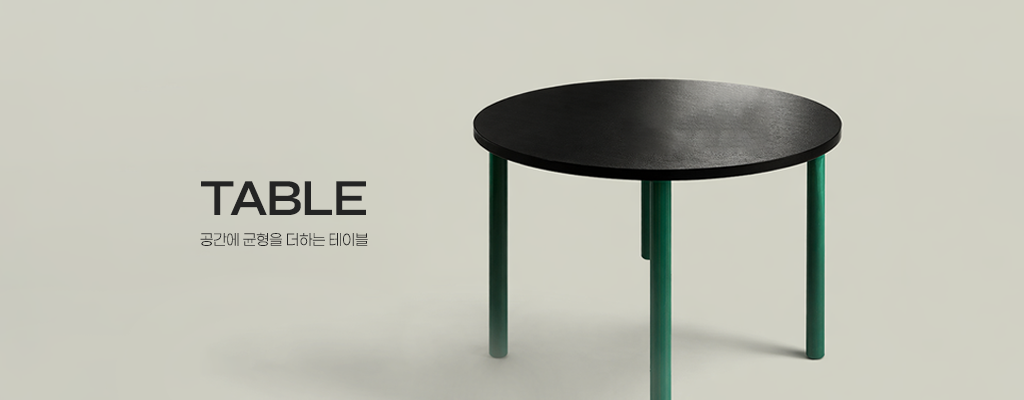
<style>
.page{position:relative;width:1024px;height:400px}
.page>*{position:absolute;margin:0}
.t1{font:52px "Syne-SemiBold";letter-spacing:-0.04em;color:#242424}
.t2{font:15px "Paperlogy-2ExtraLight";color:#242424}
</style>
<div class="page">
<p class="t1" style="left:201px;top:181px;width:165px;height:34px">TABLE</p>
<p class="t2" style="left:200px;top:232px;width:168px;height:14px">공간에 균형을 더하는 테이블</p>
</div>
